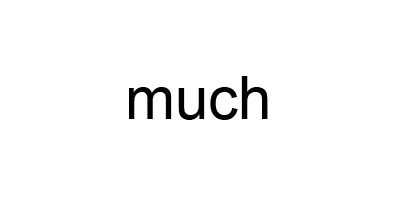
<style>
.page{position:relative;width:400px;height:200px;background:#ffffff}
.page>*{position:absolute;margin:0}
.t1{font:60px "ArialMT";color:#000000}
</style>
<div class="page">
<p class="t1" style="left:129px;top:76px;width:139px;height:44px">much</p>
</div>
